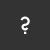
<style>
.page{position:relative;width:50px;height:50px;background:#333333}
.page>*{position:absolute;margin:0}
.t1{font:28px "surrounding-bold";color:#ffffff}
</style>
<div class="page">
<p class="t1" style="left:20px;top:16px;width:10px;height:18px">?</p>
</div>
